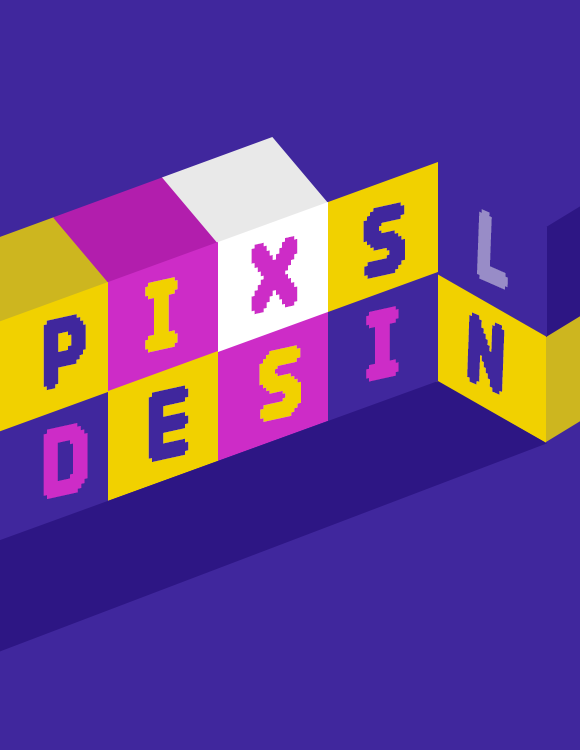
<style>
.page{position:relative;width:580px;height:750px;background:#40279d}
.page>*{position:absolute;margin:0}
.t1{font:77.1px "DNFBitBitv2";color:#40279d;scale:0.82 1}
.t2{font:77.1px "DNFBitBitv2";color:#988cc7;scale:0.73 1}
.t3{font:77.1px "DNFBitBitv2";color:#cd2cc7;scale:0.82 1}
.t4{font:77.1px "DNFBitBitv2";color:#f1d100;scale:0.82 1}
.t5{font:77.1px "DNFBitBitv2";color:#40279d;scale:0.73 1}
</style>
<div class="page">
<p class="t1" style="left:363px;top:202px;width:42px;height:77px;rotate:-12deg">S</p>
<p class="t2" style="left:477px;top:209px;width:31px;height:81px;rotate:24deg">L</p>
<p class="t3" style="left:251px;top:236px;width:47px;height:79px;rotate:-12deg">X</p>
<p class="t4" style="left:145px;top:277px;width:33px;height:76px;rotate:-12deg">I</p>
<p class="t1" style="left:43px;top:314px;width:43px;height:77px;rotate:-12deg">P</p>
<p class="t3" style="left:366px;top:306px;width:33px;height:76px;rotate:-12deg">I</p>
<p class="t5" style="left:467px;top:312px;width:38px;height:83px;rotate:24deg">N</p>
<p class="t4" style="left:259px;top:345px;width:42px;height:77px;rotate:-12deg">S</p>
<p class="t1" style="left:148px;top:385px;width:41px;height:77px;rotate:-12deg">E</p>
<p class="t3" style="left:43px;top:423px;width:45px;height:76px;rotate:-12deg">D</p>
</div>
